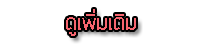
<style>
.page{position:relative;width:200px;height:50px;background:#ffffff}
.page>*{position:absolute;margin:0}
.t1{font:25px "PK-Maehongson-Medium";color:#f7656f}
</style>
<div class="page">
<p class="t1" style="left:66px;top:9px;width:70px;height:27px">ดูเพิ่มเติม</p>
</div>
